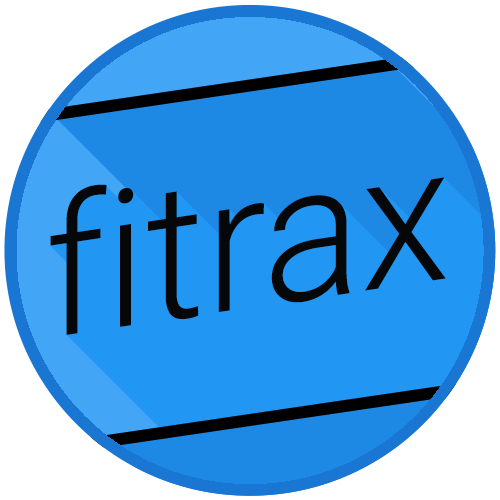
<style>
.page{position:relative;width:500px;height:500px;background:#2196f3}
.page>*{position:absolute;margin:0}
.t1{font:191px "Roboto-Light";color:#060709;scale:0.97 1}
</style>
<div class="page">
<p class="t1" style="left:50px;top:177px;width:396px;height:158px;rotate:-9deg">fitrax</p>
</div>
